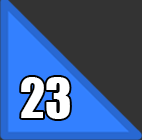
<style>
.page{position:relative;width:142px;height:140px;background:#333333}
.page>*{position:absolute;margin:0}
.t1{font:50px "Impact";color:#ffffff}
</style>
<div class="page">
<p class="t1" style="left:21px;top:77px;width:49px;height:42px">23</p>
</div>
